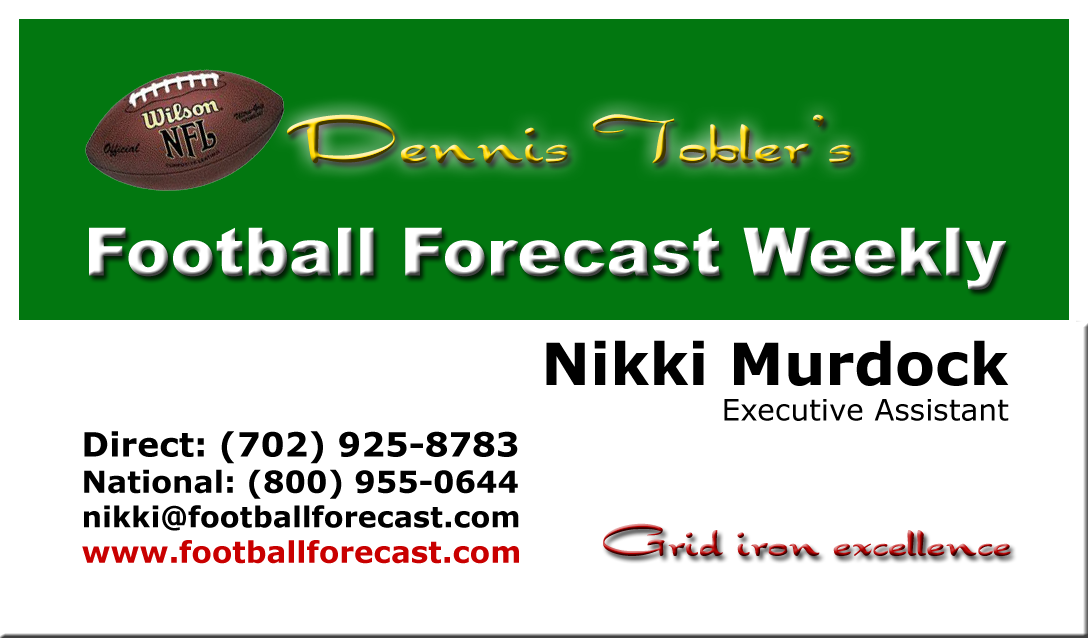
<style>
.page{position:relative;width:1088px;height:638px;background:#ffffff}
.page>*{position:absolute;margin:0}
.t1{font:29.6px "Verdana";color:#000000}
.t2{font:58.3px "Verdana-Bold";color:#000000}
.t3{font:28.8px "Verdana-Bold";color:#000000}
.t4{font:33.3px "Verdana-Bold";color:#000000}
.t5{font:30.2px "Verdana-Bold";color:#000000}
.t6{font:29.6px "Verdana-Bold";color:#c90000}
.t7{font:50px "Draconian"}
</style>
<div class="page">
<p class="t1" style="left:546px;top:340px;width:463px;height:81px;text-align:right"><span class="t2">Nikki Murdock<br></span>Executive Assistant</p>
<p class="t3" style="left:82px;top:431px;width:437px;height:133px"><span class="t4">Direct: (702) 925-8783<br></span><span class="t5">National: (800) 955-0644<br></span>nikki@footballforecast.com<br><span class="t6">www.footballforecast.com</span></p>
<p class="t7" style="left:603px;top:523px;width:408px;height:33px">Grid iron excellence</p>
</div>
